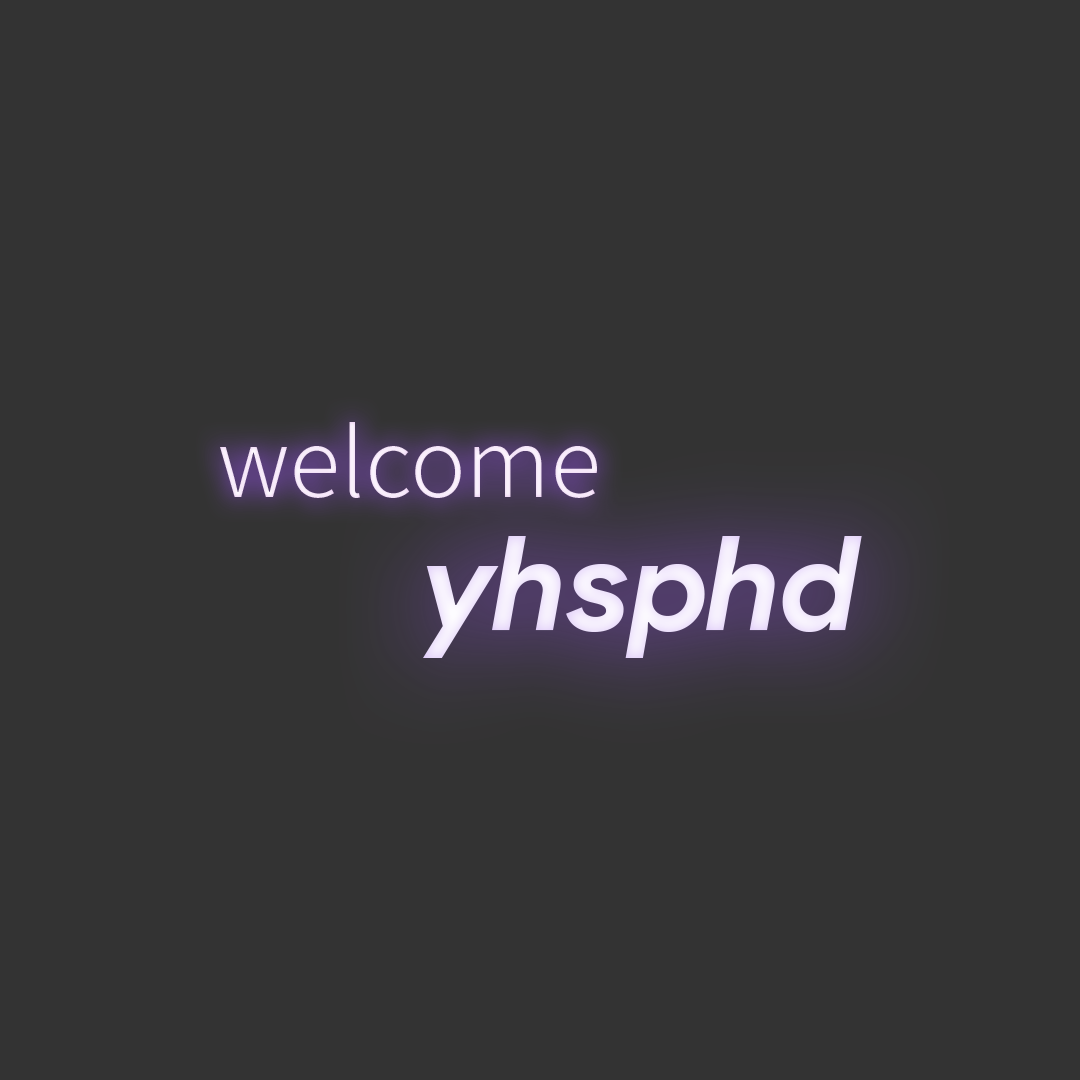
<style>
.page{position:relative;width:1080px;height:1080px;background:#333333}
.page>*{position:absolute;margin:0}
.t1{font:94px "NotoSansCJKkr-Light";color:#ffffff}
.t2{font:131px "ProductSans-BoldItalic";color:#ffffff}
</style>
<div class="page">
<p class="t1" style="left:220px;top:422px;width:377px;height:76px">welcome</p>
<p class="t2" style="left:423px;top:536px;width:439px;height:122px">yhsphd</p>
</div>
